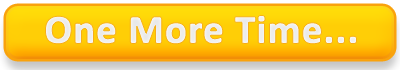
<style>
.page{position:relative;width:400px;height:70px}
.page>*{position:absolute;margin:0}
.t1{font:40px "Calibri-Bold";color:#e8e8e8;font-weight:bold}
</style>
<div class="page">
<p class="t1" style="left:45px;top:15px;width:312px;height:29px">One More Time...</p>
</div>
